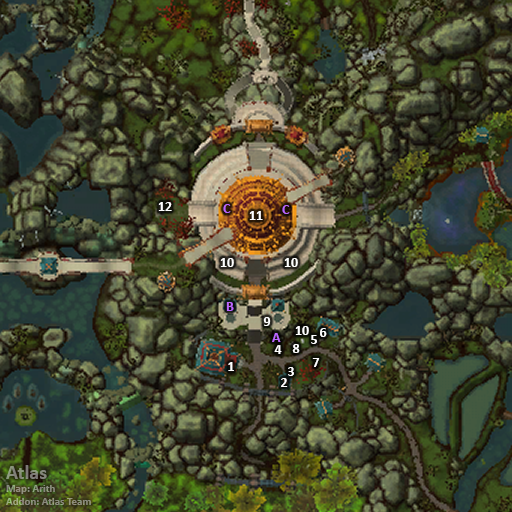
<style>
.page{position:relative;width:512px;height:512px}
.page>*{position:absolute;margin:0}
.t1{font:14px "Calibri-Bold";color:#ffffff}
.t2{font:14px "Calibri-Bold";color:#bb66ff}
.t3{font:11px "Calibri-Bold";color:#8a8d7b}
.t4{font:20px "Calibri-Bold";color:#8a8d7b}
</style>
<div class="page">
<p class="t1" style="left:158px;top:202px;width:14px;height:9px">12</p>
<p class="t2" style="left:223px;top:204px;width:8px;height:9px">C</p>
<p class="t2" style="left:282px;top:205px;width:8px;height:9px">C</p>
<p class="t1" style="left:249px;top:211px;width:14px;height:9px">11</p>
<p class="t1" style="left:220px;top:258px;width:14px;height:9px">10</p>
<p class="t1" style="left:284px;top:258px;width:14px;height:9px">10</p>
<p class="t2" style="left:226px;top:302px;width:8px;height:9px">B</p>
<p class="t1" style="left:263px;top:317px;width:8px;height:9px">9</p>
<p class="t1" style="left:295px;top:326px;width:14px;height:9px">10</p>
<p class="t1" style="left:320px;top:328px;width:7px;height:9px">6</p>
<p class="t2" style="left:272px;top:333px;width:9px;height:9px">A</p>
<p class="t1" style="left:311px;top:335px;width:6px;height:9px">5</p>
<p class="t1" style="left:274px;top:345px;width:8px;height:9px">4</p>
<p class="t1" style="left:292px;top:344px;width:8px;height:9px">8</p>
<p class="t1" style="left:228px;top:362px;width:6px;height:9px">1</p>
<p class="t1" style="left:312px;top:358px;width:8px;height:9px">7</p>
<p class="t1" style="left:288px;top:367px;width:6px;height:9px">3</p>
<p class="t1" style="left:281px;top:378px;width:7px;height:9px">2</p>
<p class="t3" style="left:6px;top:465px;width:85px;height:40px"><span class="t4">Atlas<br></span>Map: Arith<br>Addon: Atlas Team</p>
</div>
